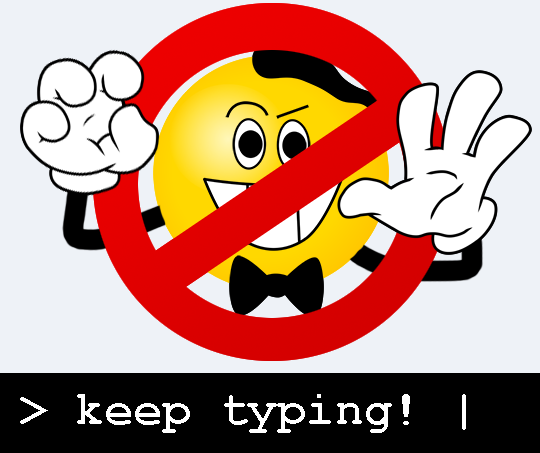
<style>
.page{position:relative;width:540px;height:453px;background:#eef2f7}
.page>*{position:absolute;margin:0}
.t1{font:48px "CourierNewPS-BoldMT";color:#ffffff}
</style>
<div class="page">
<p class="t1" style="left:20px;top:394px;width:446px;height:39px">&gt; keep typing! |</p>
</div>
